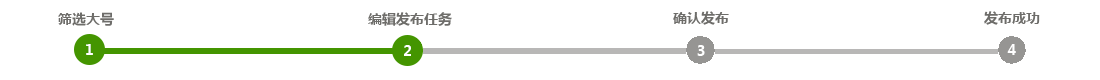
<style>
.page{position:relative;width:1100px;height:80px;background:#ffffff}
.page>*{position:absolute;margin:0}
.t1{font:14px "MicrosoftYaHei-Bold";color:#6e6d6a}
.t2{font:14px "MicrosoftYaHei-Bold";color:#ffffff}
</style>
<div class="page">
<p class="t1" style="left:58px;top:12px;width:56px;height:14px">筛选大号</p>
<p class="t1" style="left:368px;top:12px;width:84px;height:14px">编辑发布任务</p>
<p class="t1" style="left:673px;top:11px;width:56px;height:14px">确认发布</p>
<p class="t1" style="left:984px;top:11px;width:56px;height:14px">发布成功</p>
<p class="t2" style="left:86px;top:44px;width:7px;height:11px">1</p>
<p class="t2" style="left:404px;top:45px;width:7px;height:11px">2</p>
<p class="t2" style="left:697px;top:45px;width:8px;height:11px">3</p>
<p class="t2" style="left:1007px;top:44px;width:9px;height:11px">4</p>
</div>
